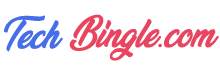
<style>
.page{position:relative;width:220px;height:67px;background:#ffffff}
.page>*{position:absolute;margin:0}
.t1{font:30.6px "VeganStylePersonalUse";color:#466ee8}
.t2{font:30.6px "VeganStylePersonalUse";color:#e84560}
.t3{font:30.6px "TimesNewRomanPSMT";color:#e84560}
</style>
<div class="page">
<p class="t1" style="left:3px;top:15px;width:60px;height:37px">Tech</p>
<p class="t2" style="left:69px;top:14px;width:150px;height:47px">Bingle<span class="t3">.</span>com</p>
</div>
